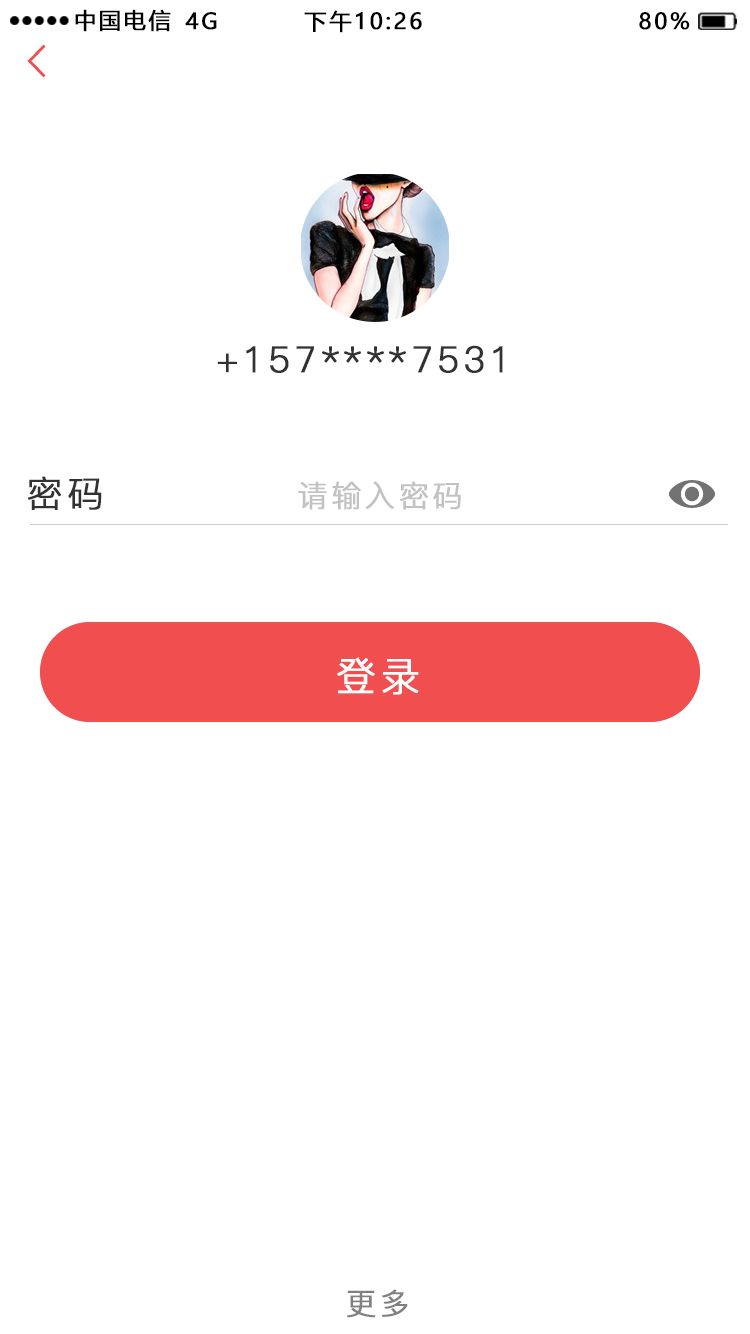
<style>
.page{position:relative;width:750px;height:1334px;background:#ffffff}
.page>*{position:absolute;margin:0}
.t1{font:22px "MicrosoftYaHei";letter-spacing:0.1em;color:#000000;text-transform:uppercase;font-weight:bold}
.t2{font:36px "PingFang-SC-Regular";letter-spacing:0.1em;color:#323233;text-transform:uppercase;font-weight:bold}
.t3{font:30px "PingFang-SC-Regular";letter-spacing:0.1em;color:#c2c2c2;text-transform:uppercase;font-weight:bold}
.t4{font:40px "PingFang-SC-Regular";letter-spacing:0.1em;color:#ffffff;text-transform:uppercase;font-weight:bold}
.t5{font:30px "PingFang-SC-Regular";letter-spacing:0.1em;color:#808080;text-transform:uppercase;font-weight:bold}
</style>
<div class="page">
<p class="t1" style="left:75px;top:9px;width:96px;height:23px">中国电信</p>
<p class="t1" style="left:185px;top:12px;width:32px;height:18px">4G</p>
<p class="t1" style="left:304px;top:10px;width:118px;height:23px">下午10:26</p>
<p class="t1" style="left:639px;top:12px;width:51px;height:18px">80%</p>
<p class="t2" style="left:217px;top:345px;width:286px;height:28px">+157****7531</p>
<p class="t2" style="left:27px;top:476px;width:75px;height:34px">密码</p>
<p class="t3" style="left:298px;top:481px;width:163px;height:29px">请输入密码</p>
<p class="t4" style="left:337px;top:657px;width:82px;height:38px">登录</p>
<p class="t5" style="left:347px;top:1289px;width:61px;height:29px">更多</p>
</div>
